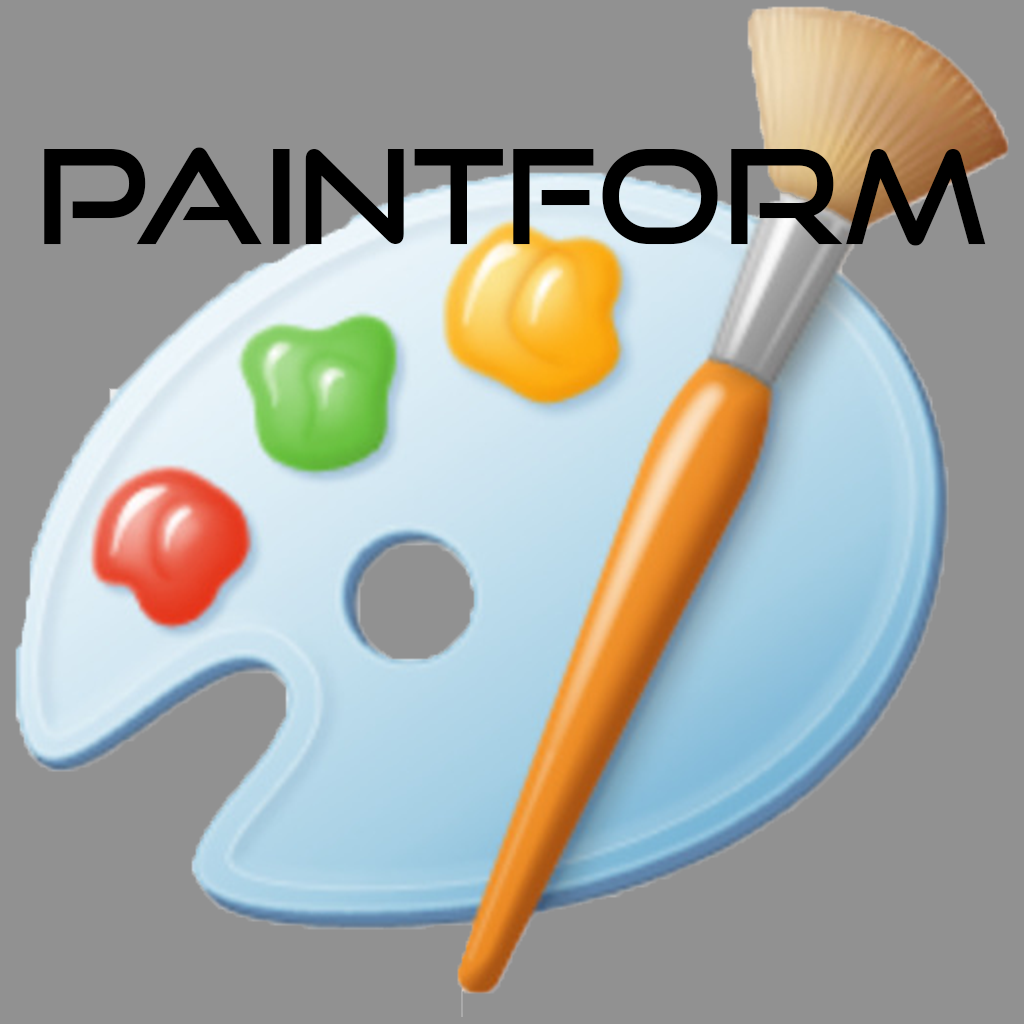
<style>
.page{position:relative;width:1024px;height:1024px;background:#919191}
.page>*{position:absolute;margin:0}
.t1{font:130px "GoodTimesRg-Regular";color:#000000}
</style>
<div class="page">
<p class="t1" style="left:44px;top:147px;width:942px;height:99px">Paintform</p>
</div>
